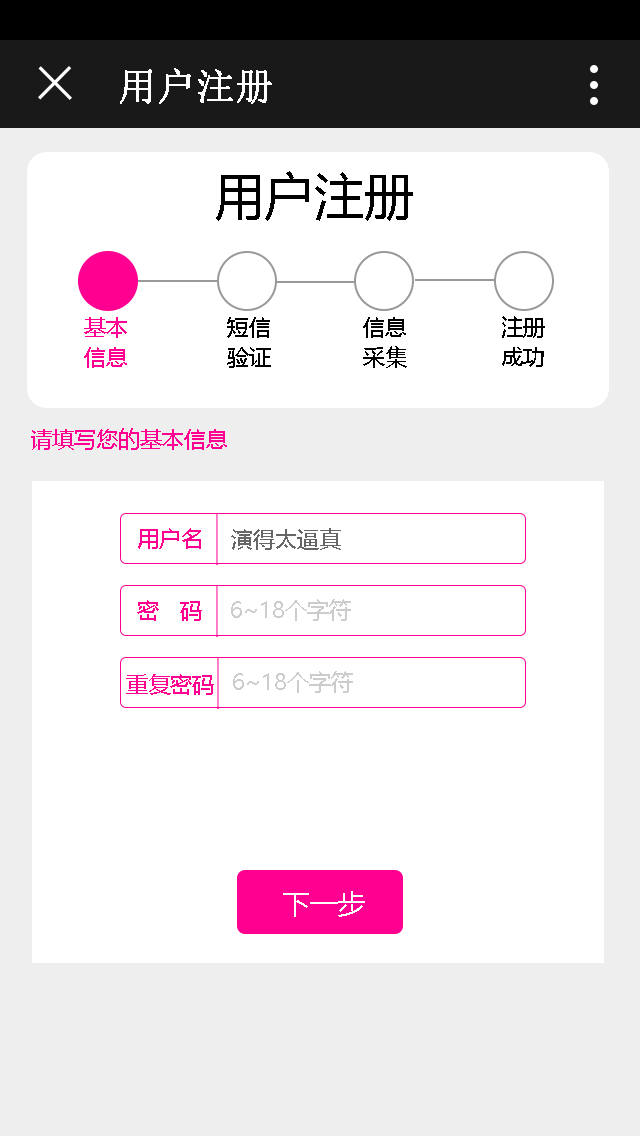
<style>
.page{position:relative;width:640px;height:1136px;background:#ffffff}
.page>*{position:absolute;margin:0}
.t1{font:38px "SimSun";color:#ffffff;font-weight:bold}
.t2{font:50px "MicrosoftYaHei";color:#000000}
.t3{font:22px/30px "MicrosoftYaHei";color:#ff0090}
.t4{font:22px/30px "MicrosoftYaHei";color:#000000}
.t5{font:22px/30px "MicrosoftYaHei";color:#030303}
.t6{font:22px "MicrosoftYaHei";color:#ff0090}
.t7{font:22px "MicrosoftYaHei";color:#666666}
.t8{font:22px "MicrosoftYaHei";color:#cccccc}
.t9{font:28px "MicrosoftYaHei";color:#ffffff}
</style>
<div class="page">
<p class="t1" style="left:120px;top:68px;width:152px;height:36px">用户注册</p>
<p class="t2" style="left:216px;top:171px;width:197px;height:50px">用户注册</p>
<p class="t3" style="left:84px;top:317px;width:43px;height:51px">基本<br>信息</p>
<p class="t4" style="left:227px;top:317px;width:44px;height:51px">短信<br>验证</p>
<p class="t5" style="left:363px;top:317px;width:44px;height:51px">信息<br>采集</p>
<p class="t4" style="left:502px;top:316px;width:43px;height:51px">注册<br>成功</p>
<p class="t6" style="left:31px;top:428px;width:196px;height:22px">请填写您的基本信息</p>
<p class="t6" style="left:138px;top:528px;width:63px;height:21px">用户名</p>
<p class="t7" style="left:231px;top:528px;width:110px;height:22px">演得太逼真</p>
<p class="t6" style="left:137px;top:600px;width:65px;height:21px">密   码</p>
<p class="t8" style="left:231px;top:599px;width:120px;height:22px">6~18个字符</p>
<p class="t6" style="left:126px;top:674px;width:88px;height:21px">重复密码</p>
<p class="t8" style="left:233px;top:671px;width:120px;height:22px">6~18个字符</p>
<p class="t9" style="left:283px;top:891px;width:82px;height:26px">下一步</p>
</div>
